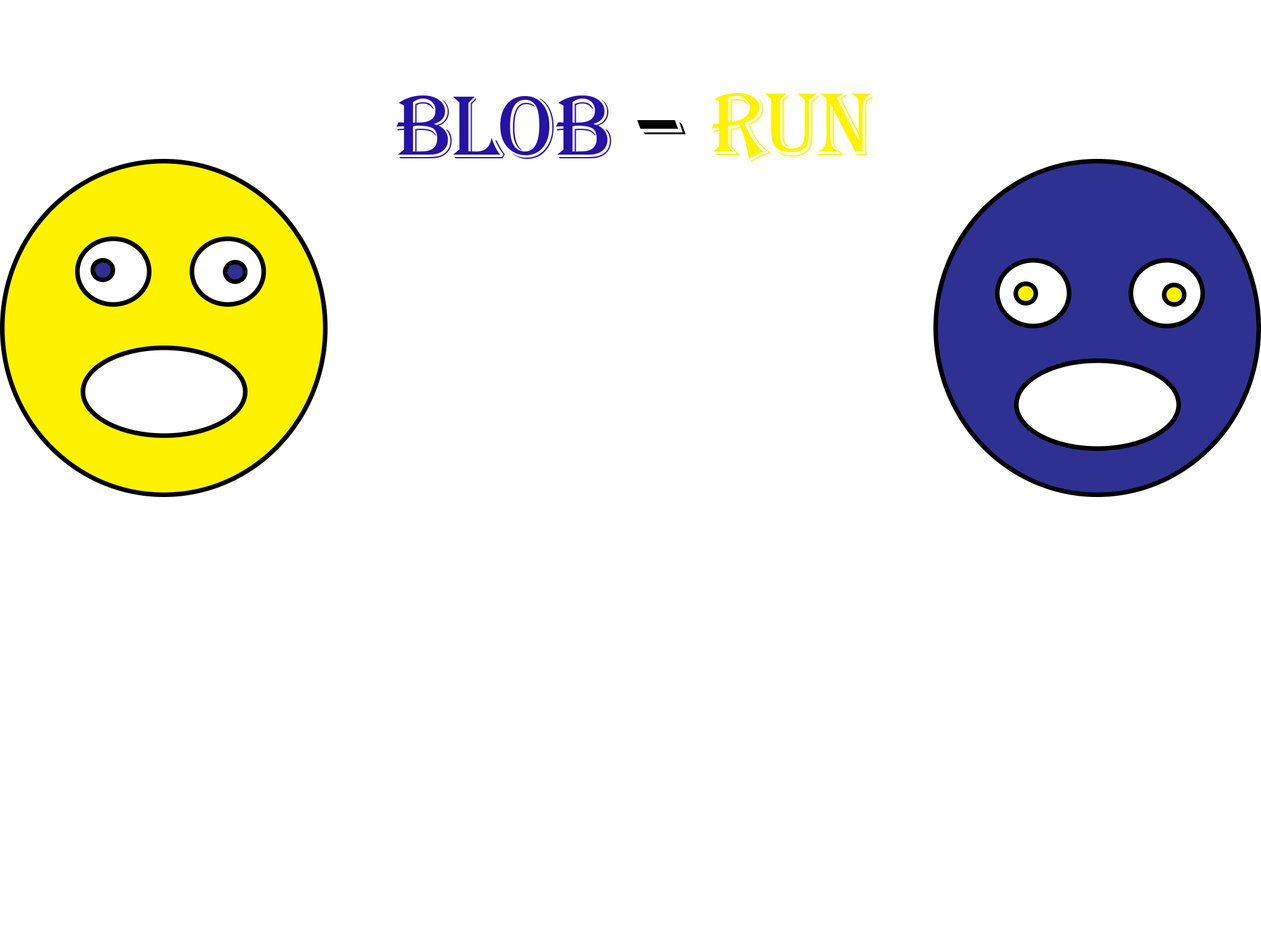
<style>
.page{position:relative;width:1261px;height:946px;background:#ffffff}
.page>*{position:absolute;margin:0}
.t1{font:92.4px "Algerian";color:#2612a5}
.t2{font:92.4px "Algerian";color:#fff200}
.t3{font:153.9px "Algerian";color:#010101}
</style>
<div class="page">
<p class="t1" style="left:396px;top:95px;width:215px;height:64px">Blob</p>
<p class="t2" style="left:712px;top:93px;width:162px;height:69px">Run</p>
<p class="t3" style="left:637px;top:120px;width:49px;height:14px">-</p>
</div>
